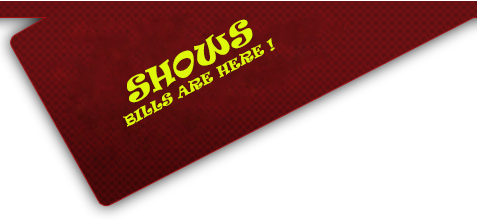
<style>
.page{position:relative;width:477px;height:220px;background:#ffffff}
.page>*{position:absolute;margin:0}
.t1{font:14px/18px "Ravie";letter-spacing:0.01em;color:#def70b;text-transform:uppercase;font-style:italic}
.t2{font:30px/30px "Ravie";letter-spacing:0.01em;color:#def70b;text-transform:uppercase;font-style:italic}
</style>
<div class="page">
<p class="t1" style="left:123px;top:19px;width:152px;height:108px;text-align:center;rotate:-28deg"><span class="t2">SHOWS<br></span>BilLs are here !</p>
</div>
